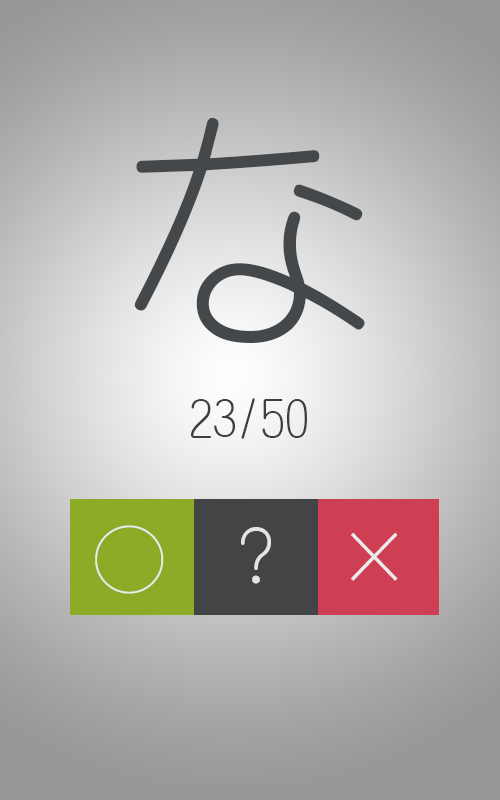
<style>
.page{position:relative;width:500px;height:800px}
.page>*{position:absolute;margin:0}
.t1{font:256px "TYenRound-Light";color:#45484a}
.t2{font:200px "TYenRound-Light";color:#d5d6d7}
.t3{font:48px "TYenRound-Light";color:#413d3d}
.t4{font:72px "TYenRound-Light";color:#eaeaea}
.t5{font:72px "TYenRound-Light";color:#e4e4e4}
</style>
<div class="page">
<p class="t1" style="left:134px;top:117px;width:231px;height:226px"><span class="t2"><br></span>な</p>
<p class="t3" style="left:191px;top:398px;width:116px;height:41px">23/50</p>
<p class="t4" style="left:95px;top:525px;width:69px;height:69px">○</p>
<p class="t5" style="left:241px;top:527px;width:30px;height:57px">?</p>
<p class="t4" style="left:351px;top:532px;width:47px;height:49px">×</p>
</div>
